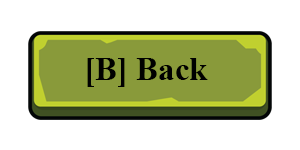
<style>
.page{position:relative;width:300px;height:150px;background:#ffffff}
.page>*{position:absolute;margin:0}
.t1{font:33px "TimesNewRomanPS-BoldMT";color:#000000}
</style>
<div class="page">
<p class="t1" style="left:87px;top:58px;width:121px;height:29px">[B] Back</p>
</div>
